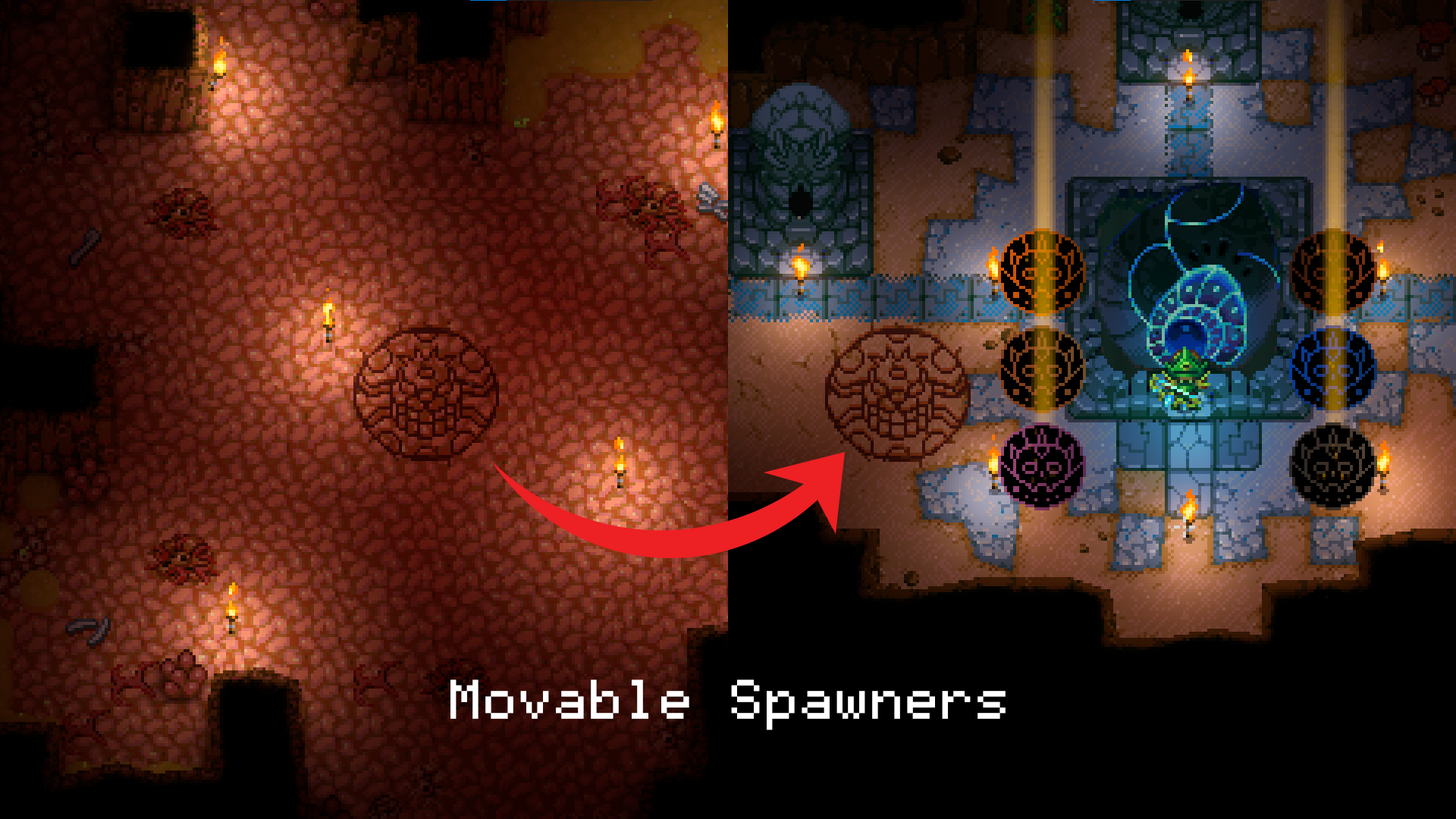
<style>
.page{position:relative;width:1456px;height:819px}
.page>*{position:absolute;margin:0}
.t1{font:113.7px "Fifaks1.0dev1";letter-spacing:0.03em;color:#ffffff}
</style>
<div class="page">
<p class="t1" style="left:450px;top:679px;width:556px;height:51px">Movable Spawners</p>
</div>
